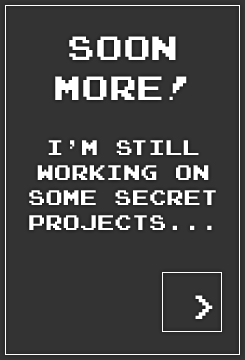
<style>
.page{position:relative;width:245px;height:360px;background:#333333}
.page>*{position:absolute;margin:0}
.t1{font:33.4px "JoystixMonospace-Regular";color:#ffffff}
.t2{font:20.9px "JoystixMonospace-Regular";color:#ffffff}
</style>
<div class="page">
<p class="t1" style="left:55px;top:36px;width:132px;height:64px;text-align:center">Soon<br>more!</p>
<p class="t2" style="left:29px;top:140px;width:187px;height:90px;text-align:center">I’m still working on some secret projects...</p>
<p class="t1" style="left:195px;top:295px;width:18px;height:24px">&gt;</p>
</div>
